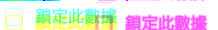
<style>
.page{position:relative;width:218px;height:30px;background:#ffffff}
.page>*{position:absolute;margin:0}
.t1{font:16px "AdobeFanHeitiStd-Bold";font-weight:bold}
</style>
<div class="page">
<p class="t1" style="left:35px;top:8px;width:82px;height:16px">鎖定此數據</p>
</div>
